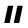
<style>
.page{position:relative;width:28px;height:28px;background:#ffffff}
.page>*{position:absolute;margin:0}
.t1{font:24px "Arial-BlackItalic";color:#000000}
</style>
<div class="page">
<p class="t1" style="left:4px;top:5px;width:19px;height:18px">II</p>
</div>
